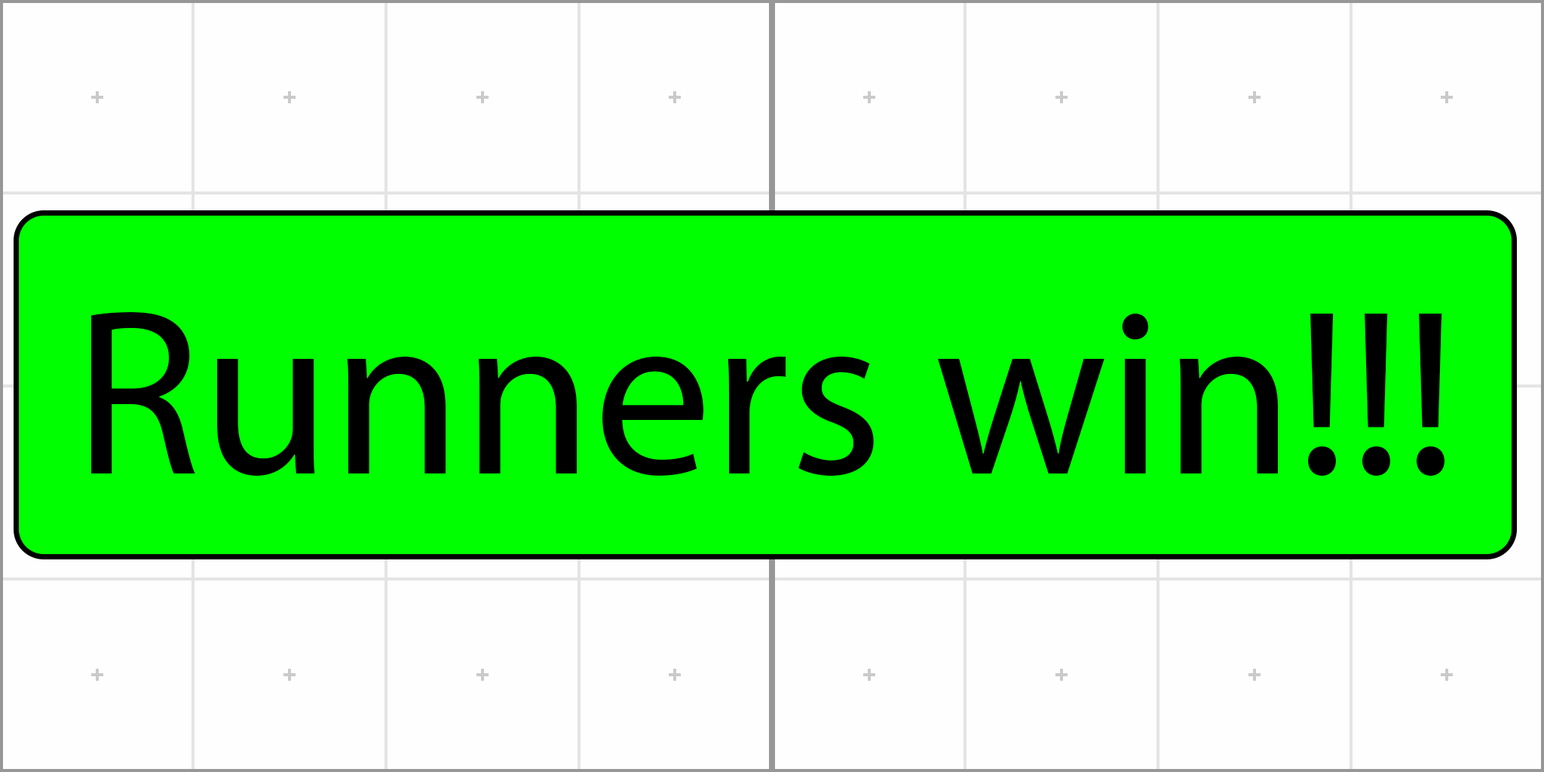
<style>
.page{position:relative;width:1544px;height:772px;background:#fefefe}
.page>*{position:absolute;margin:0}
.t1{font:236.8px "MyriadPro-Regular";color:#000000}
</style>
<div class="page">
<p class="t1" style="left:91px;top:312px;width:1354px;height:165px">Runners win!!!</p>
</div>
